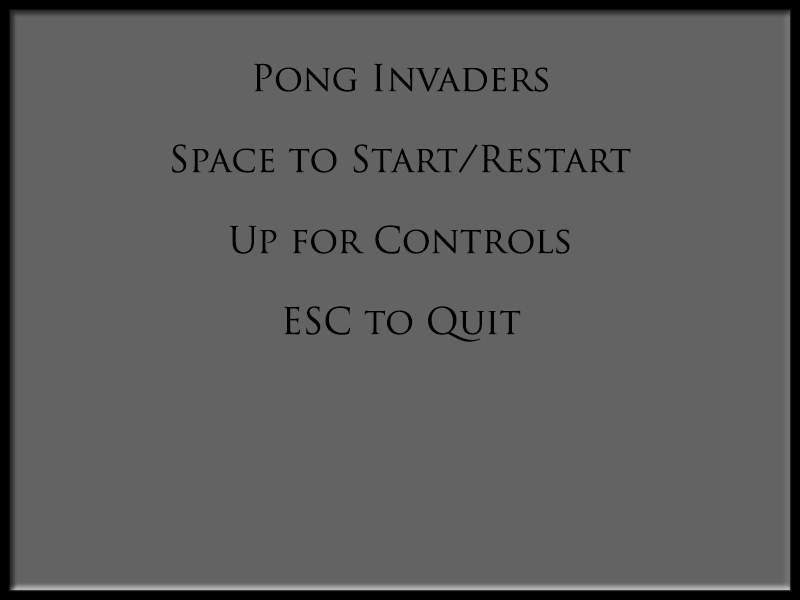
<style>
.page{position:relative;width:800px;height:600px;background:#636363}
.page>*{position:absolute;margin:0}
.t1{font:36px "TrajanPro-Regular";color:#000000}
</style>
<div class="page">
<p class="t1" style="left:254px;top:63px;width:294px;height:29px">Pong Invaders</p>
<p class="t1" style="left:172px;top:144px;width:459px;height:29px">Space to Start/Restart</p>
<p class="t1" style="left:229px;top:225px;width:341px;height:29px">Up for Controls</p>
<p class="t1" style="left:284px;top:306px;width:237px;height:36px">ESC to Quit</p>
</div>
